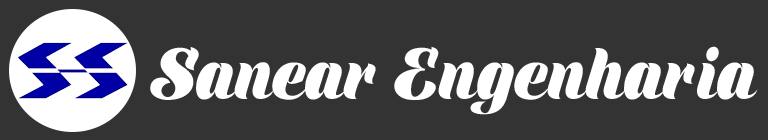
<style>
.page{position:relative;width:768px;height:140px;background:#333333}
.page>*{position:absolute;margin:0}
.t1{font:60px "ShinePersonalUse";color:#ffffff}
</style>
<div class="page">
<p class="t1" style="left:150px;top:46px;width:608px;height:69px">Sanear Engenharia</p>
</div>
